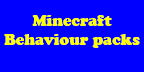
<style>
.page{position:relative;width:144px;height:72px;background:#0000ff}
.page>*{position:absolute;margin:0}
.t1{font:16px "CooperBlack";color:#ffff00}
</style>
<div class="page">
<p class="t1" style="left:4px;top:15px;width:136px;height:33px;text-align:center">Minecraft<br>Behaviour packs</p>
</div>
